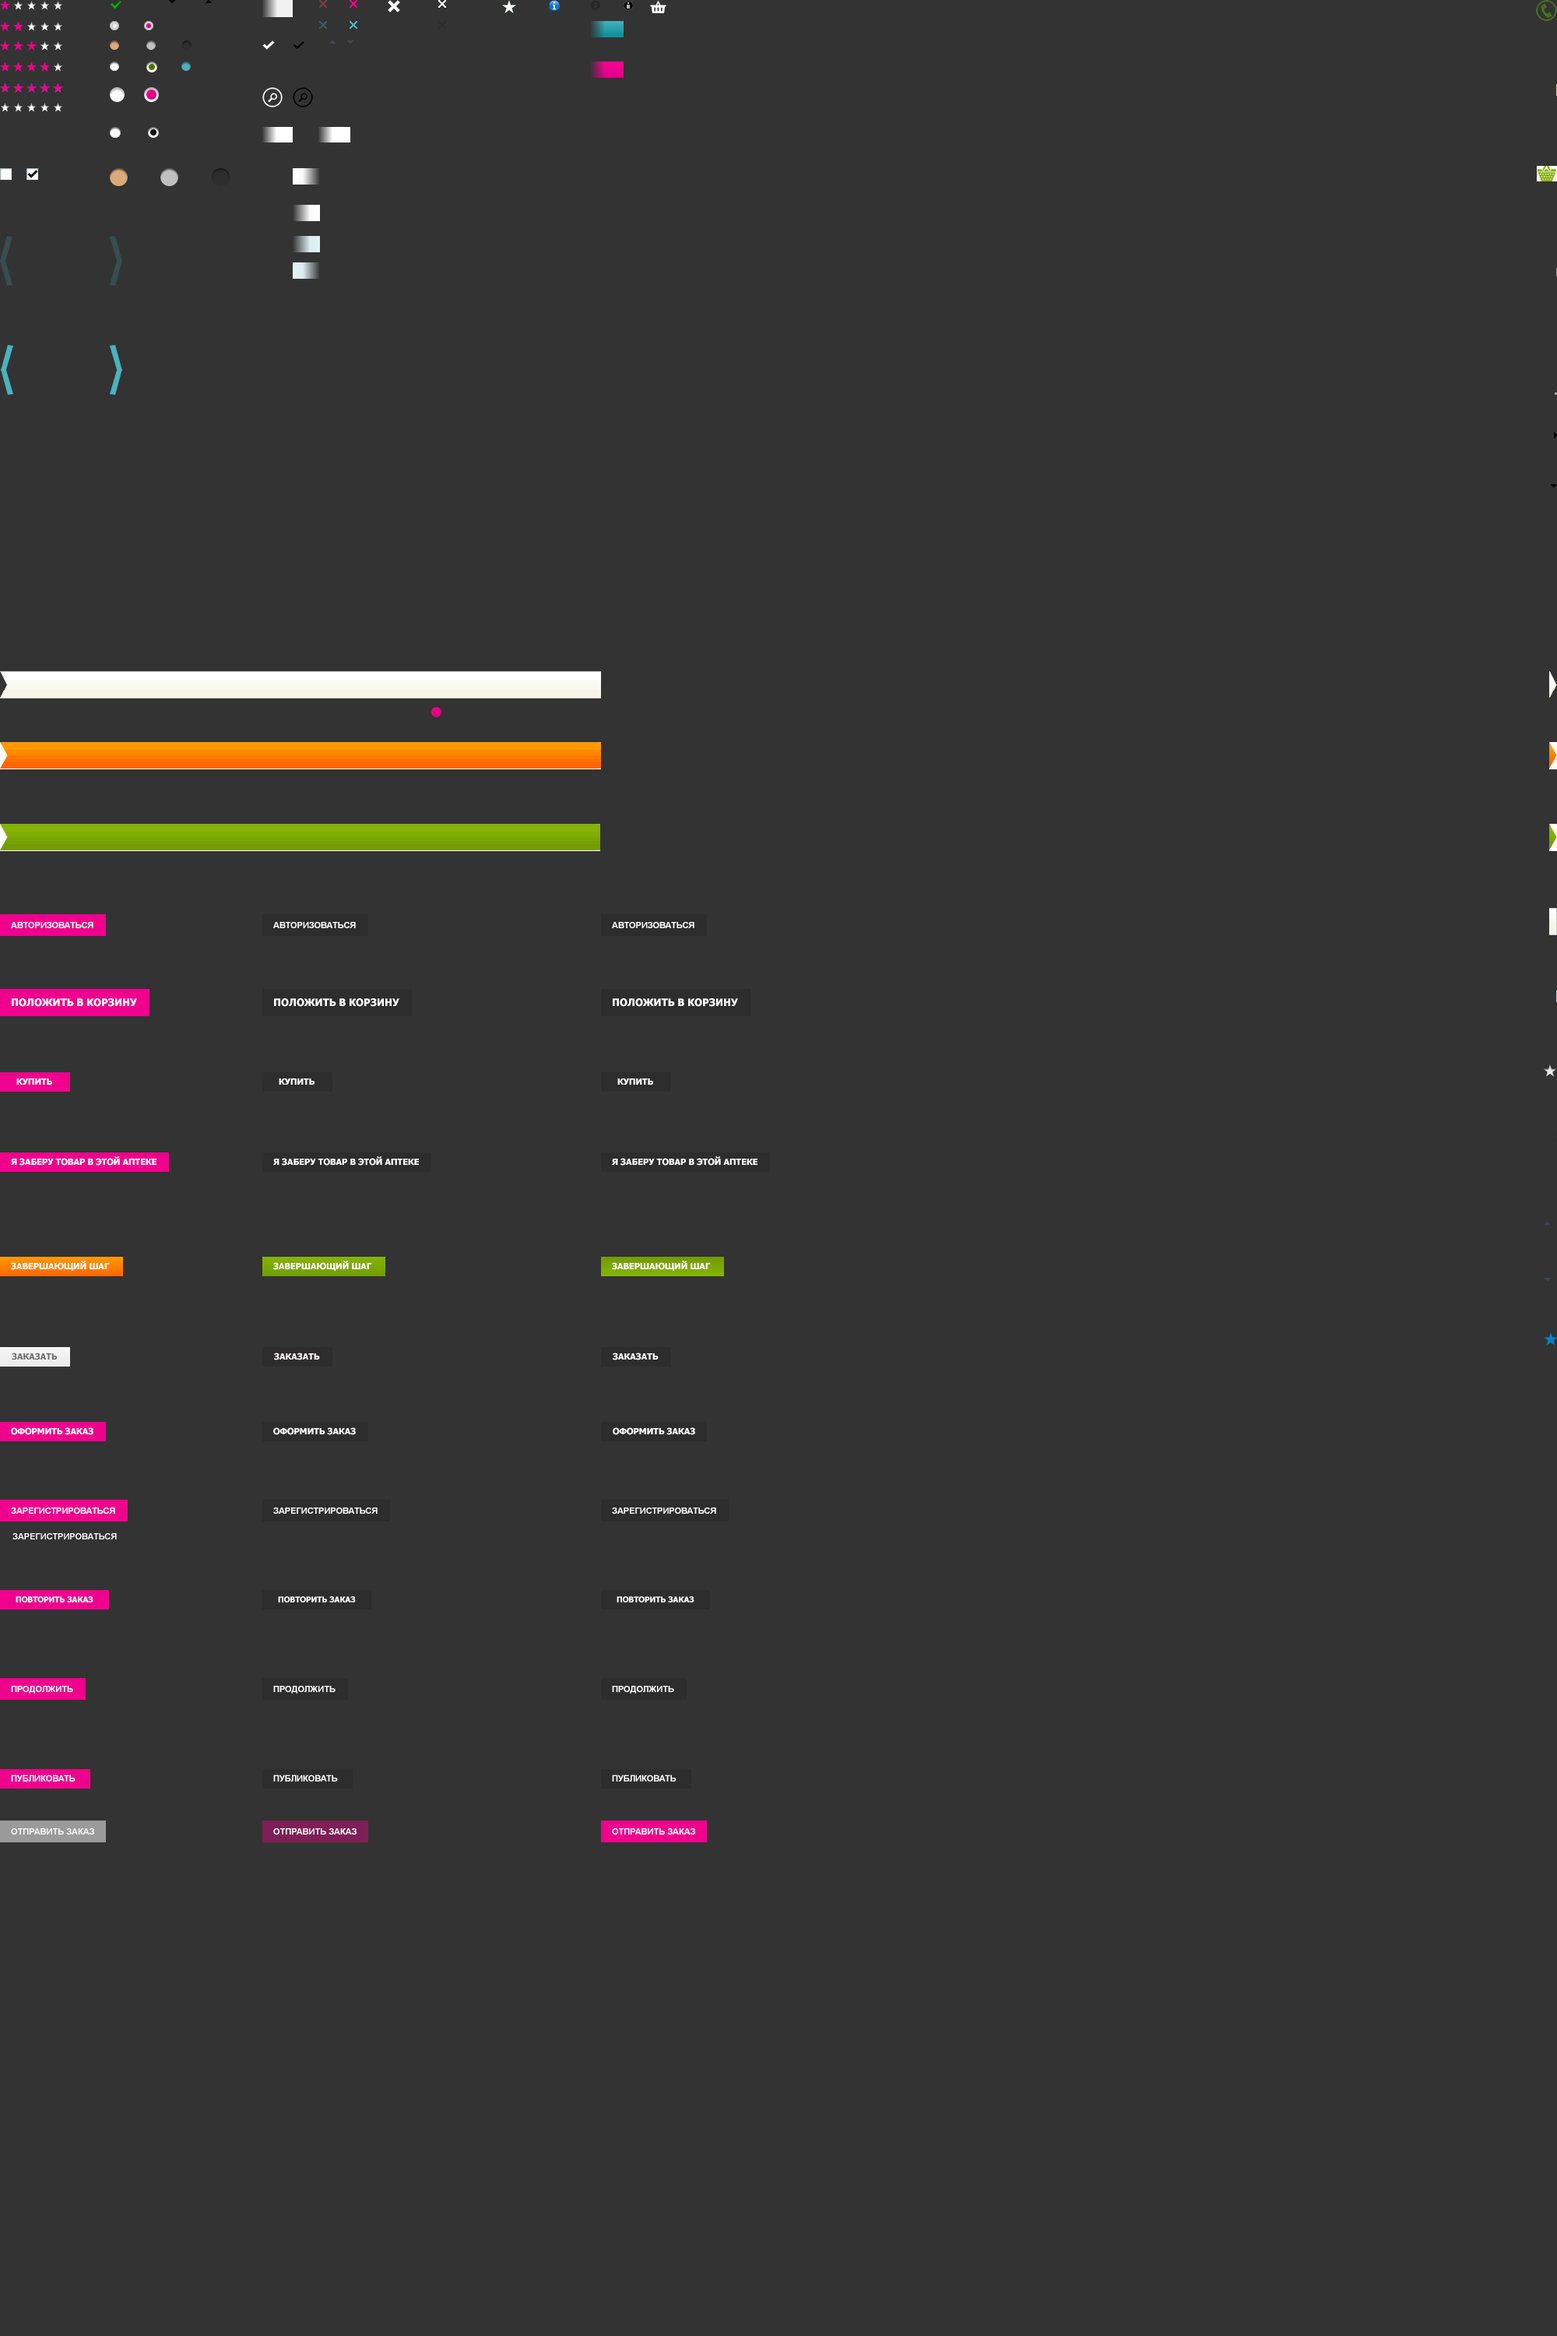
<style>
.page{position:relative;width:1557px;height:2336px;background:#333333}
.page>*{position:absolute;margin:0}
.t1{font:8.6px "Arial-BoldMT";color:#ffffff}
.t2{font:10.1px "Tahoma-Bold";color:#ffffff}
.t3{font:8.6px "Tahoma-Bold";color:#ffffff}
.t4{font:8.6px "Tahoma-Bold";color:#fffbfb}
.t5{font:8.6px "Tahoma-Bold";color:#fefefe}
.t6{font:7.8px "Tahoma-Bold";color:#ffffff}
</style>
<div class="page">
<p class="t1" style="left:11px;top:922px;width:82px;height:6px">АВТОРИЗОВАТЬСЯ</p>
<p class="t1" style="left:273px;top:922px;width:83px;height:6px">АВТОРИЗОВАТЬСЯ</p>
<p class="t1" style="left:612px;top:922px;width:83px;height:6px">АВТОРИЗОВАТЬСЯ</p>
<p class="t2" style="left:12px;top:998px;width:125px;height:9px">ПОЛОЖИТЬ В КОРЗИНУ</p>
<p class="t2" style="left:274px;top:998px;width:125px;height:9px">ПОЛОЖИТЬ В КОРЗИНУ</p>
<p class="t2" style="left:613px;top:998px;width:125px;height:9px">ПОЛОЖИТЬ В КОРЗИНУ</p>
<p class="t3" style="left:16px;top:1078px;width:36px;height:7px">КУПИТЬ</p>
<p class="t3" style="left:279px;top:1078px;width:36px;height:7px">КУПИТЬ</p>
<p class="t3" style="left:618px;top:1078px;width:35px;height:7px">КУПИТЬ</p>
<p class="t3" style="left:11px;top:1156px;width:146px;height:10px">Я ЗАБЕРУ ТОВАР В ЭТОЙ АПТЕКЕ</p>
<p class="t3" style="left:273px;top:1156px;width:146px;height:10px">Я ЗАБЕРУ ТОВАР В ЭТОЙ АПТЕКЕ</p>
<p class="t3" style="left:612px;top:1156px;width:146px;height:10px">Я ЗАБЕРУ ТОВАР В ЭТОЙ АПТЕКЕ</p>
<p class="t4" style="left:274px;top:1353px;width:46px;height:7px">ЗАКАЗАТЬ</p>
<p class="t5" style="left:613px;top:1353px;width:46px;height:7px">ЗАКАЗАТЬ</p>
<p class="t1" style="left:11px;top:1508px;width:104px;height:6px">ЗАРЕГИСТРИРОВАТЬСЯ</p>
<p class="t1" style="left:273px;top:1508px;width:105px;height:6px">ЗАРЕГИСТРИРОВАТЬСЯ</p>
<p class="t1" style="left:612px;top:1508px;width:104px;height:6px">ЗАРЕГИСТРИРОВАТЬСЯ</p>
<p class="t1" style="left:12px;top:1533px;width:105px;height:6px">ЗАРЕГИСТРИРОВАТЬСЯ</p>
<p class="t6" style="left:16px;top:1596px;width:77px;height:7px">ПОВТОРИТЬ ЗАКАЗ</p>
<p class="t6" style="left:278px;top:1596px;width:78px;height:7px">ПОВТОРИТЬ ЗАКАЗ</p>
<p class="t6" style="left:617px;top:1596px;width:78px;height:7px">ПОВТОРИТЬ ЗАКАЗ</p>
<p class="t1" style="left:11px;top:1686px;width:62px;height:8px">ПРОДОЛЖИТЬ</p>
<p class="t1" style="left:273px;top:1686px;width:63px;height:8px">ПРОДОЛЖИТЬ</p>
<p class="t1" style="left:612px;top:1686px;width:62px;height:8px">ПРОДОЛЖИТЬ</p>
<p class="t1" style="left:11px;top:1775px;width:65px;height:7px">ПУБЛИКОВАТЬ</p>
<p class="t1" style="left:273px;top:1775px;width:65px;height:7px">ПУБЛИКОВАТЬ</p>
<p class="t1" style="left:612px;top:1775px;width:65px;height:7px">ПУБЛИКОВАТЬ</p>
<p class="t1" style="left:11px;top:1828px;width:83px;height:7px">ОТПРАВИТЬ ЗАКАЗ</p>
<p class="t1" style="left:273px;top:1828px;width:84px;height:7px">ОТПРАВИТЬ ЗАКАЗ</p>
<p class="t1" style="left:612px;top:1828px;width:83px;height:7px">ОТПРАВИТЬ ЗАКАЗ</p>
</div>
